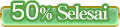
<style>
.page{position:relative;width:120px;height:27px;background:#ffffff}
.page>*{position:absolute;margin:0}
.t1{font:18px "RyuminPro-ExBold";letter-spacing:-0.08em;color:#ffffff}
.t2{font:23.8px "WineArial";color:#ffffff;scale:1.05 1}
.t3{font:16px "RyuminPro-ExBold";color:#ffffff}
</style>
<div class="page">
<p class="t1" style="left:12px;top:2px;width:96px;height:18px"><span class="t2">50</span><span class="t3">% </span>Selesai</p>
</div>
